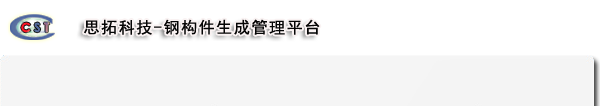
<style>
.page{position:relative;width:600px;height:106px;background:#ffffff}
.page>*{position:absolute;margin:0}
.t1{font:12px "hzgb";letter-spacing:0.25em;color:#ff1726}
.t2{font:12px "hzgb";letter-spacing:0.25em;color:#546b9e}
.t3{font:12px "hzgb";letter-spacing:0.25em;color:#bc7589}
.t4{font:16px "SimHei";letter-spacing:0.1em;color:#050505}
</style>
<div class="page">
<p class="t1" style="left:21px;top:22px;width:29px;height:11px">C<span class="t2">S</span><span class="t3">T</span></p>
<p class="t4" style="left:84px;top:19px;width:236px;height:16px">思拓科技-钢构件生成管理平台</p>
</div>
